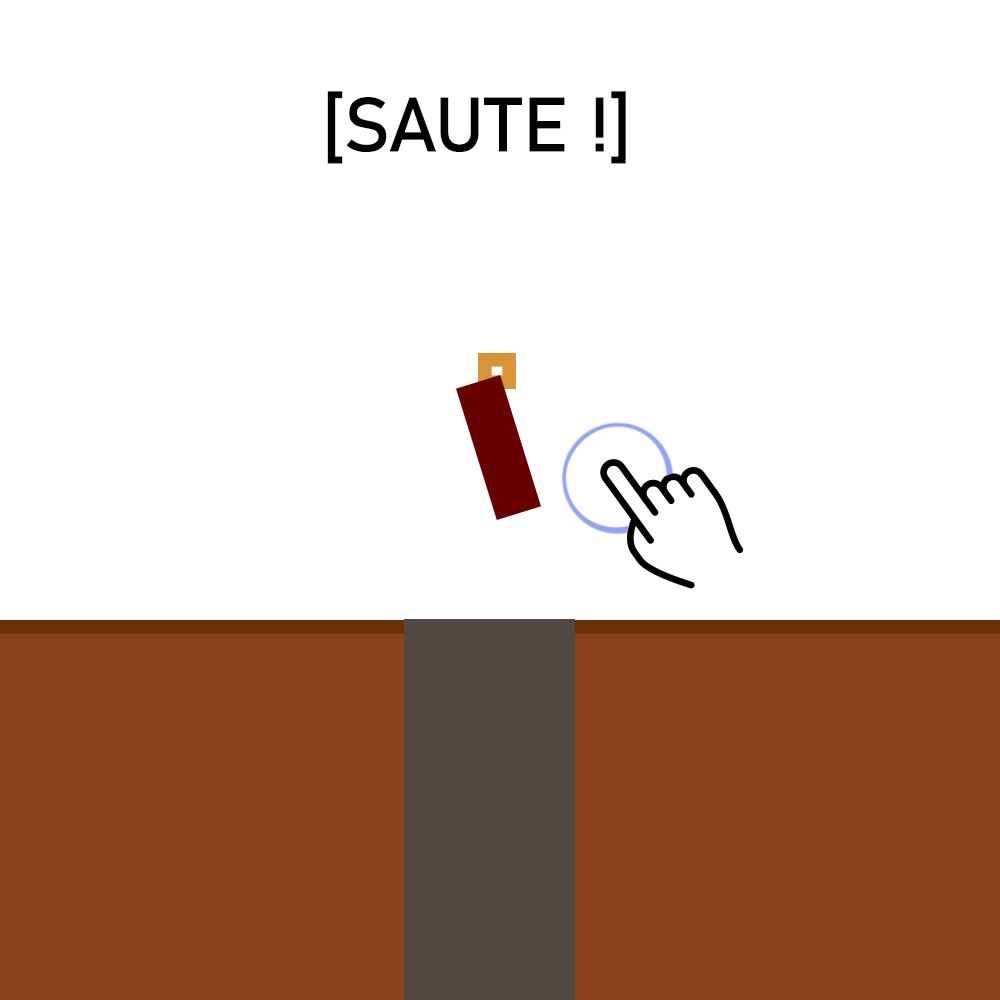
<style>
.page{position:relative;width:1000px;height:1000px;background:#ffffff}
.page>*{position:absolute;margin:0}
.t1{font:129.9px "Bahnschrift";letter-spacing:0.005em;color:#000000}
</style>
<div class="page">
<p class="t1" style="left:327px;top:91px;width:299px;height:73px">[SAUTE !]</p>
</div>
